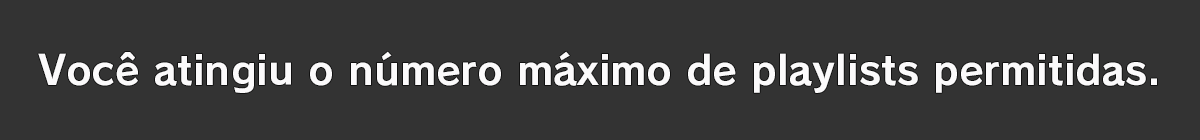
<style>
.page{position:relative;width:1200px;height:140px;background:#333333}
.page>*{position:absolute;margin:0}
.t1{font:40px "RodinPro-B";color:#fbfafb}
</style>
<div class="page">
<p class="t1" style="left:38px;top:51px;width:1119px;height:42px">Você atingiu o número máximo de playlists permitidas.</p>
</div>
